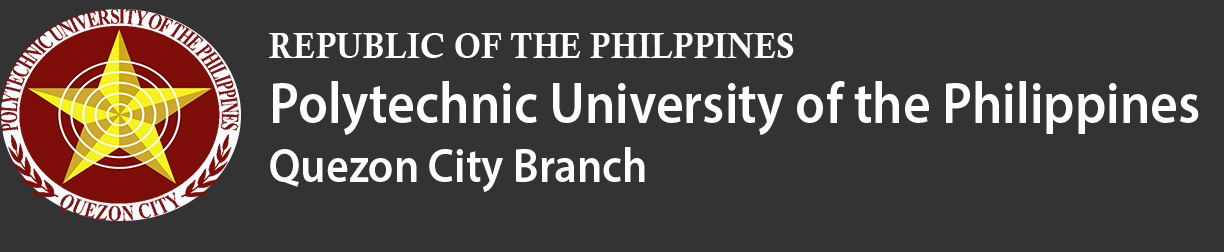
<style>
.page{position:relative;width:1224px;height:252px;background:#333333}
.page>*{position:absolute;margin:0}
.t1{font:36px "CalisMTBol";color:#fbfbfb;scale:0.93 1}
.t2{font:58px "MyriadPro-Semibold";color:#fbfbfb;scale:0.92 1}
.t3{font:60px "MyriadPro-Semibold";color:#fbfbfb;scale:0.92 1}
.t4{font:48px "MyriadPro-Semibold";color:#fbfbfb;scale:0.93 1}
</style>
<div class="page">
<p class="t1" style="left:269px;top:33px;width:525px;height:25px">REPUBLIC OF THE PHILPPINES</p>
<p class="t2" style="left:273px;top:81px;width:926px;height:54px"><span class="t3"> </span>Polytechnic University of the Philippines</p>
<p class="t4" style="left:270px;top:147px;width:375px;height:45px">Quezon City Branch</p>
</div>
